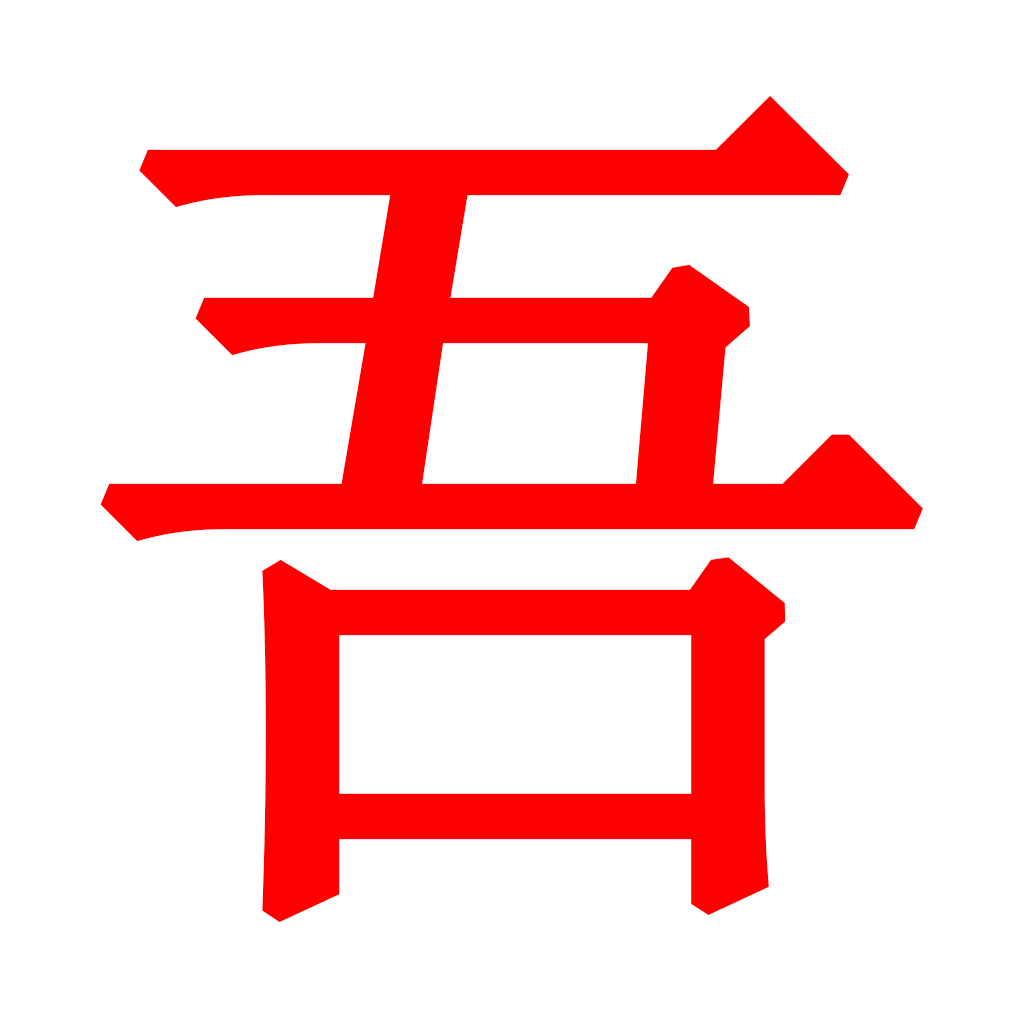
<style>
.page{position:relative;width:1024px;height:1024px;background:#ffffff}
.page>*{position:absolute;margin:0}
.t1{font:900px "SimSun";color:#ff0000;font-weight:bold}
</style>
<div class="page">
<p class="t1" style="left:100px;top:95px;width:823px;height:828px">吾</p>
</div>
